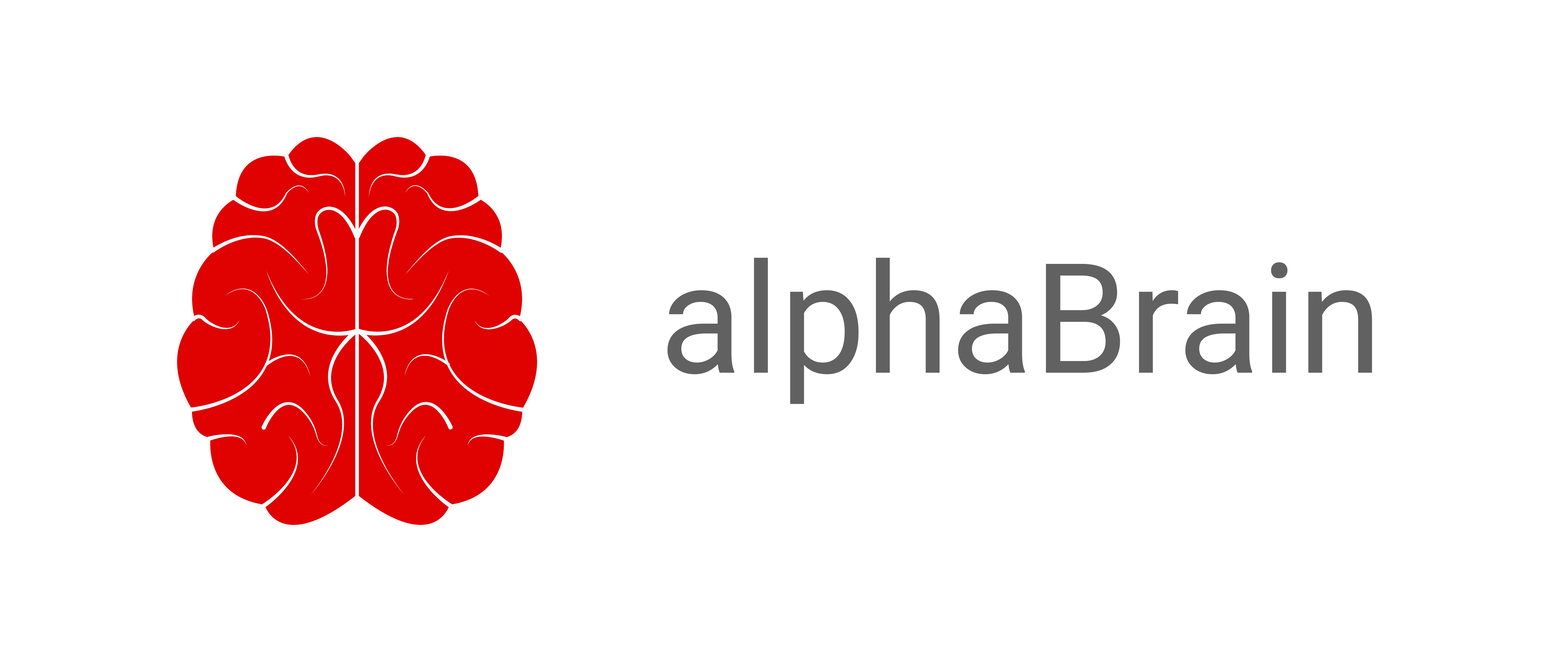
<style>
.page{position:relative;width:1568px;height:662px;background:#ffffff}
.page>*{position:absolute;margin:0}
.t1{font:153.1px "Roboto-Regular";color:#616161}
</style>
<div class="page">
<p class="t1" style="left:667px;top:258px;width:705px;height:146px">alphaBrain</p>
</div>
